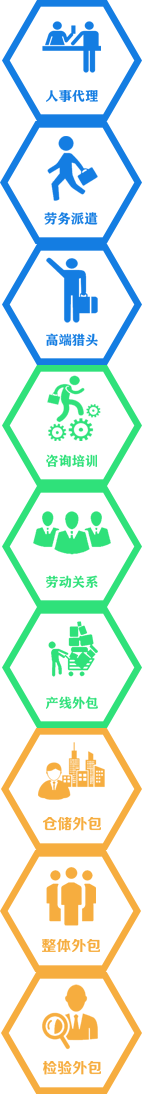
<style>
.page{position:relative;width:142px;height:1094px;background:#ffffff}
.page>*{position:absolute;margin:0}
.t1{font:13.2px "FZCHSJW--GB1-0";color:#147de2}
.t2{font:13.5px "FZCHSJW--GB1-0";color:#147de2}
.t3{font:13.2px "FZCHSJW--GB1-0";color:#2fe17a}
.t4{font:15px "FZZCHJW--GB1-0";color:#f6ad3f}
</style>
<div class="page">
<p class="t1" style="left:46px;top:90px;width:52px;height:12px">人事代理</p>
<p class="t2" style="left:44px;top:212px;width:54px;height:13px">劳务派遣</p>
<p class="t1" style="left:46px;top:333px;width:52px;height:13px">高端猎头</p>
<p class="t3" style="left:46px;top:454px;width:51px;height:13px">咨询培训</p>
<p class="t3" style="left:46px;top:575px;width:52px;height:13px">劳动关系</p>
<p class="t3" style="left:46px;top:696px;width:52px;height:13px">产线外包</p>
<p class="t4" style="left:43px;top:817px;width:58px;height:14px">仓储外包</p>
<p class="t4" style="left:42px;top:939px;width:58px;height:13px">整体外包</p>
<p class="t4" style="left:43px;top:1061px;width:58px;height:14px">检验外包</p>
</div>
